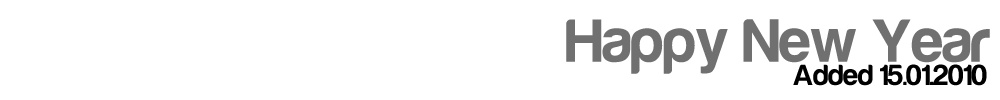
<style>
.page{position:relative;width:1000px;height:100px;background:#ffffff}
.page>*{position:absolute;margin:0}
.t1{font:63px "Harabara-Bold";color:#707070}
.t2{font:30px "Harabara-Bold";color:#000000}
</style>
<div class="page">
<p class="t1" style="left:566px;top:19px;width:424px;height:55px">Happy New Year</p>
<p class="t2" style="left:793px;top:64px;width:194px;height:22px">Added 15.01.2010</p>
</div>
